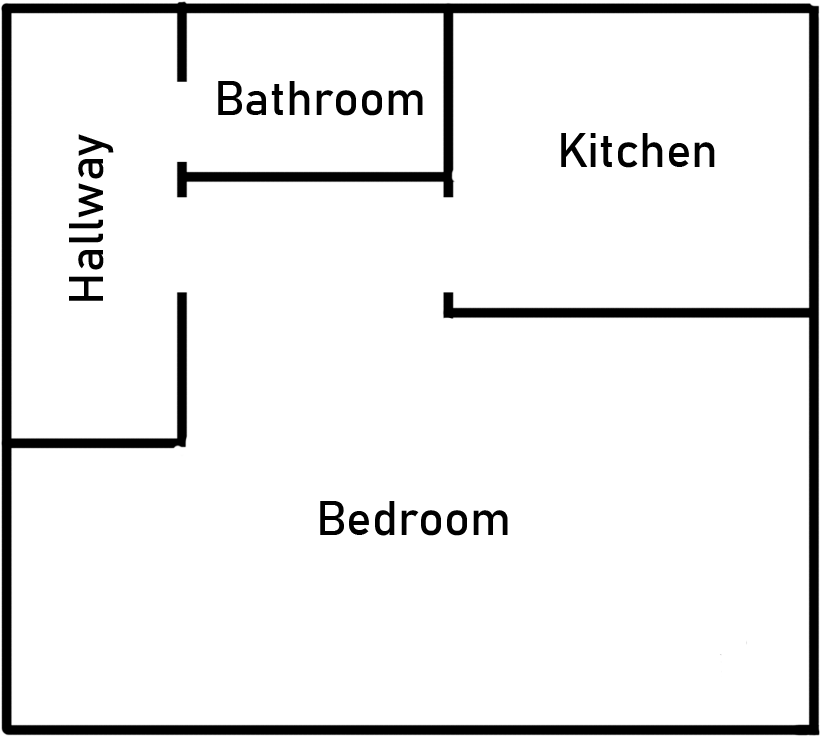
<style>
.page{position:relative;width:823px;height:739px;background:#ffffff}
.page>*{position:absolute;margin:0}
.t1{font:48px "Bahnschrift";color:#000000}
</style>
<div class="page">
<p class="t1" style="left:218px;top:81px;width:205px;height:35px">Bathroom</p>
<p class="t1" style="left:69px;top:134px;width:45px;height:167px;rotate:-90deg">Hallway</p>
<p class="t1" style="left:561px;top:133px;width:154px;height:35px">Kitchen</p>
<p class="t1" style="left:320px;top:501px;width:188px;height:35px">Bedroom</p>
</div>
